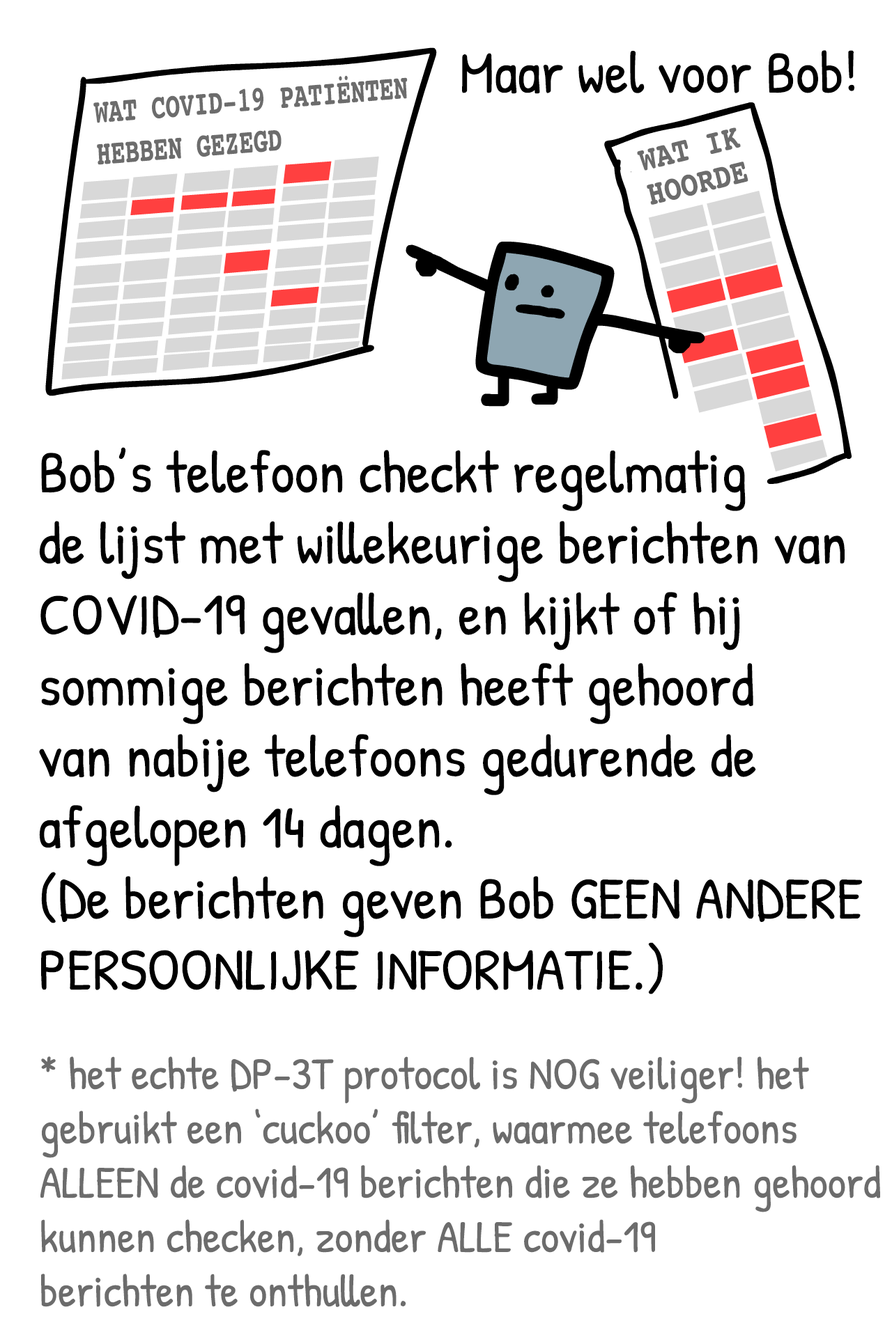
<style>
.page{position:relative;width:892px;height:1337px;background:#ffffff}
.page>*{position:absolute;margin:0}
.t1{font:59.2px "PatrickHand-Regular";color:#000000}
.t2{font:34.8px/41.8px "Courier-Bold";color:#6c6c6c;scale:0.68 1}
.t3{font:34.8px/35px "Courier-Bold";color:#6c6c6c;scale:0.82 1}
.t4{font:45.3px "PatrickHand-Regular";color:#6c6c6c}
</style>
<div class="page">
<p class="t1" style="left:462px;top:50px;width:392px;height:44px">Maar wel voor Bob!</p>
<p class="t2" style="left:93px;top:75px;width:314px;height:90px;rotate:-5deg">WAT COVID-19 PATIËNTEN<br>HEBBEN GEZEGD</p>
<p class="t3" style="left:637px;top:127px;width:111px;height:78px;rotate:-14deg">WAT IK<br>HOORDE</p>
<p class="t1" style="left:39px;top:447px;width:823px;height:548px">Bob’s telefoon checkt regelmatig<br>de lijst met willekeurige berichten van<br>COVID-19 gevallen, en kijkt of hij<br>sommige berichten heeft gehoord<br>van nabije telefoons gedurende de<br>afgelopen 14 dagen.<br>(De berichten geven Bob GEEN ANDERE<br>PERSOONLIJKE INFORMATIE.)</p>
<p class="t4" style="left:40px;top:1057px;width:840px;height:250px">* het echte DP-3T protocol is NOG veiliger! het<br>gebruikt een ‘cuckoo’ filter, waarmee telefoons <br>ALLEEN de covid-19 berichten die ze hebben gehoord<br>kunnen checken, zonder ALLE covid-19<br>berichten te onthullen.</p>
</div>
